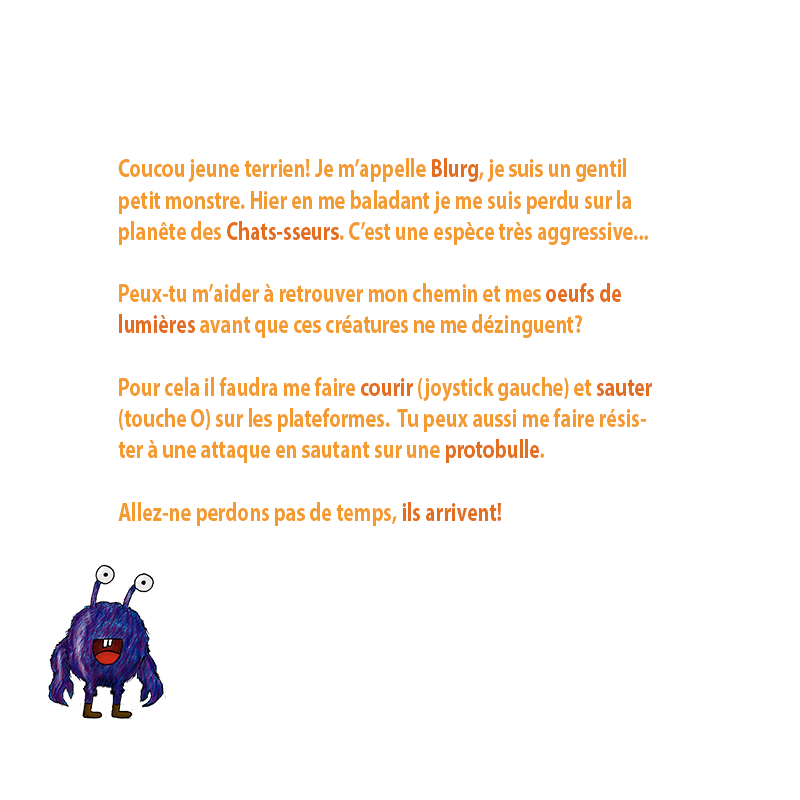
<style>
.page{position:relative;width:800px;height:800px;background:#ffffff}
.page>*{position:absolute;margin:0}
.t1{font:26px "MyriadPro-Bold";color:#f49a2f;scale:0.77 1}
.t2{font:26px "MyriadPro-Bold";color:#e46e1f;scale:0.77 1}
</style>
<div class="page">
<p class="t1" style="left:118px;top:158px;width:534px;height:368px">Coucou jeune terrien! Je m’appelle <span class="t2">Blurg</span>, je suis un gentil petit monstre. Hier en me baladant je me suis perdu sur la planête des <span class="t2">Chats-sseurs</span>. C’est une espèce très aggressive...<br><br>Peux-tu m’aider à retrouver mon chemin et mes <span class="t2">oeufs de lumières</span> avant que ces créatures ne me dézinguent? <br><br>Pour cela il faudra me faire <span class="t2">courir</span> (joystick gauche) et <span class="t2">sauter</span> (touche O) sur les plateformes.  Tu peux aussi me faire résister à une attaque en sautant sur une <span class="t2">protobulle</span>. <br><br>Allez-ne perdons pas de temps, <span class="t2">ils arrivent!</span></p>
</div>
